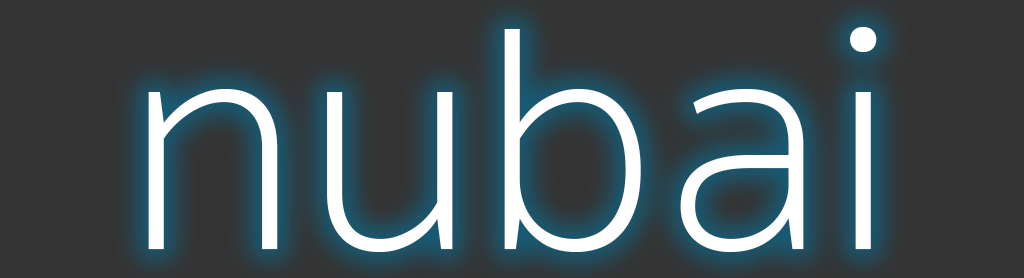
<style>
.page{position:relative;width:1024px;height:278px;background:#333333}
.page>*{position:absolute;margin:0}
.t1{font:325.8px "SukhumvitSet-Thin";letter-spacing:-0.005em;color:#ffffff}
</style>
<div class="page">
<p class="t1" style="left:148px;top:27px;width:729px;height:225px">nub ai</p>
</div>
